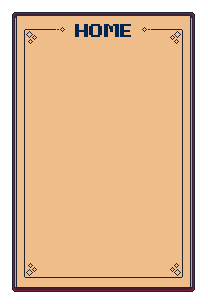
<style>
.page{position:relative;width:208px;height:304px;background:#eebd8a}
.page>*{position:absolute;margin:0}
.t1{font:25px "#ZFTerminal";color:#00264f}
</style>
<div class="page">
<p class="t1" style="left:75px;top:24px;width:56px;height:13px">HOME</p>
</div>
